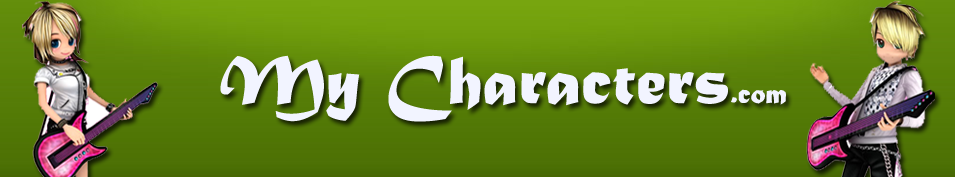
<style>
.page{position:relative;width:955px;height:177px}
.page>*{position:absolute;margin:0}
.t1{font:72px "MaturaMTScriptCapitals";color:#f2f4ff}
.t2{font:30px "MaturaMTScriptCapitals";color:#f2f4ff}
</style>
<div class="page">
<p class="t1" style="left:220px;top:55px;width:566px;height:67px">My Characters<span class="t2">.com</span></p>
</div>
